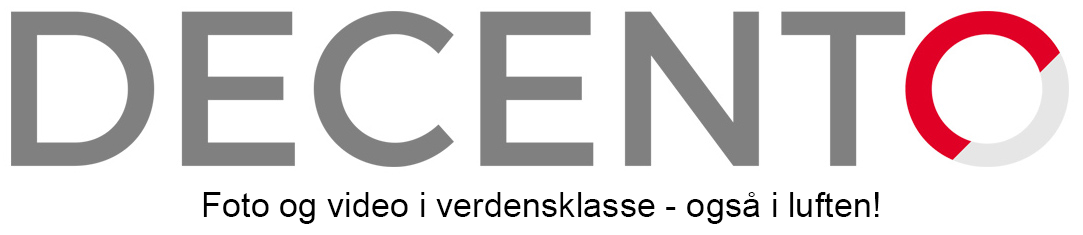
<style>
.page{position:relative;width:1083px;height:235px;background:#ffffff}
.page>*{position:absolute;margin:0}
.t1{font:34.4px "ArialMT";color:#000000}
</style>
<div class="page">
<p class="t1" style="left:203px;top:192px;width:676px;height:32px">Foto og video i verdensklasse - også i luften!</p>
</div>
